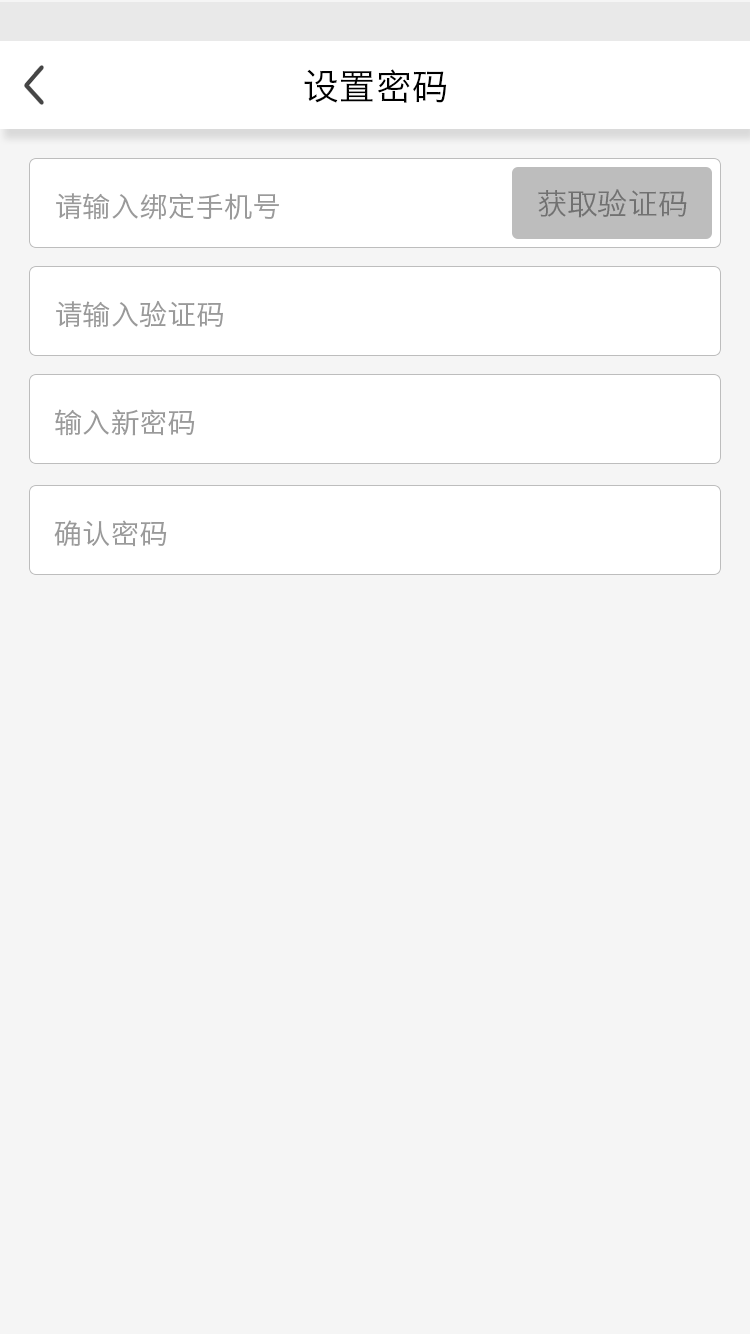
<style>
.page{position:relative;width:750px;height:1334px;background:#f5f5f5}
.page>*{position:absolute;margin:0}
.t1{font:36px "HiraginoSansGB-W3";color:#000000}
.t2{font:28px "HiraginoSansGB-W3";color:#9a9a9a}
.t3{font:30px "HiraginoSansGB-W3";color:#717171}
</style>
<div class="page">
<p class="t1" style="left:304px;top:69px;width:143px;height:34px">设置密码</p>
<p class="t2" style="left:56px;top:193px;width:223px;height:27px">请输入绑定手机号</p>
<p class="t3" style="left:538px;top:189px;width:149px;height:29px">获取验证码</p>
<p class="t2" style="left:56px;top:300px;width:167px;height:28px">请输入验证码</p>
<p class="t2" style="left:55px;top:409px;width:140px;height:27px">输入新密码</p>
<p class="t2" style="left:54px;top:520px;width:113px;height:27px">确认密码</p>
</div>
